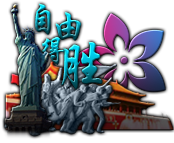
<style>
.page{position:relative;width:174px;height:143px;background:#ffffff}
.page>*{position:absolute;margin:0}
.t1{font:37.7px "STXingkai"}
.t2{font:29.9px "STXingkai"}
.t3{font:58.8px "STXingkai"}
</style>
<div class="page">
<p class="t1" style="left:35px;top:3px;width:16px;height:32px">自</p>
<p class="t1" style="left:55px;top:12px;width:26px;height:29px">由</p>
<p class="t2" style="left:40px;top:37px;width:24px;height:28px">得</p>
<p class="t3" style="left:61px;top:42px;width:42px;height:48px">胜</p>
</div>
